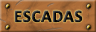
<style>
.page{position:relative;width:96px;height:32px}
.page>*{position:absolute;margin:0}
.t1{font:17.3px "Calibri-Bold";letter-spacing:0.005em;text-transform:uppercase;font-weight:bold}
</style>
<div class="page">
<p class="t1" style="left:14px;top:10px;width:69px;height:13px">escadas</p>
</div>
